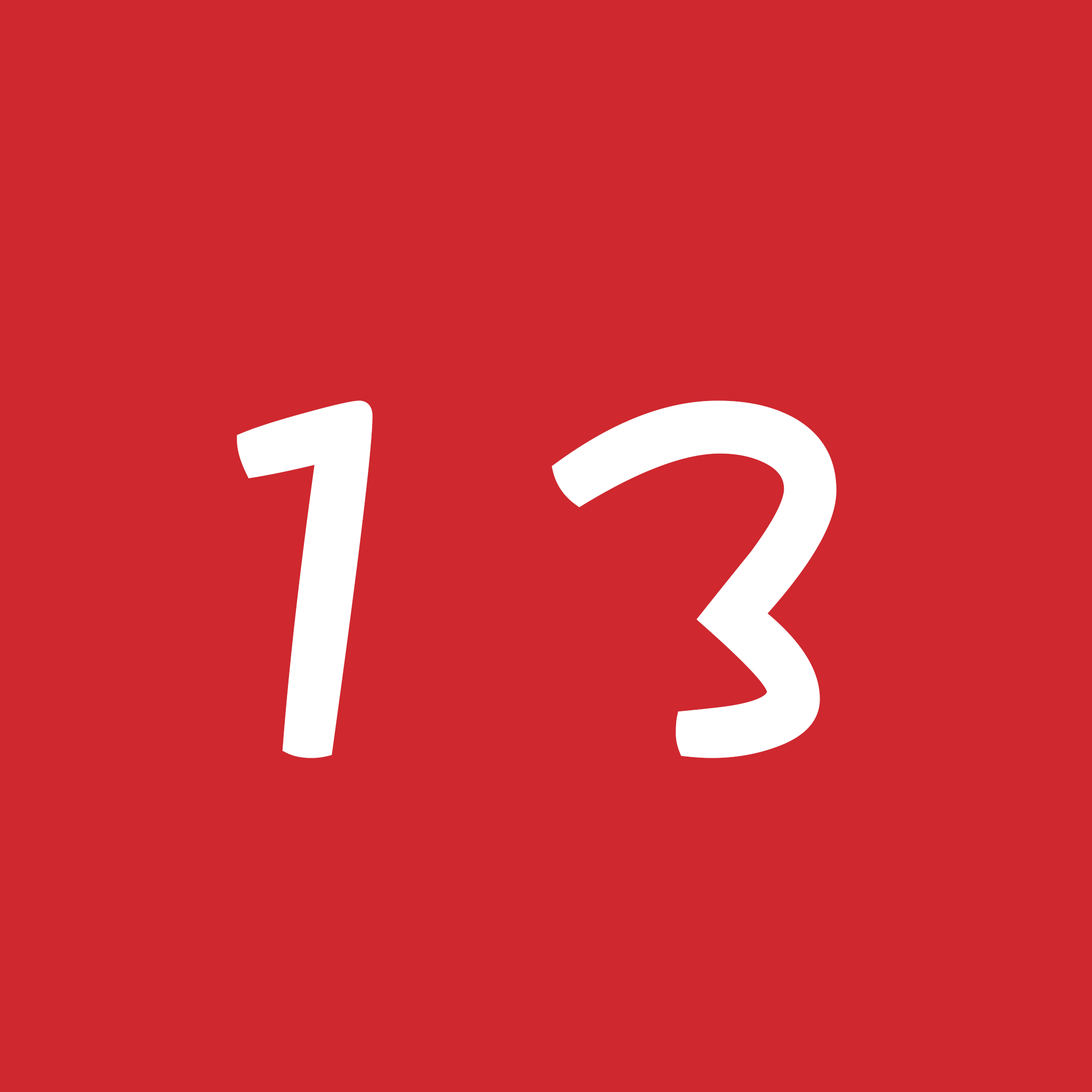
<style>
.page{position:relative;width:1092px;height:1092px;background:#cf282f}
.page>*{position:absolute;margin:0}
.t1{font:533.2px "DFPWaWaW5";color:#ffffff;font-weight:bold}
</style>
<div class="page">
<p class="t1" style="left:237px;top:400px;width:600px;height:358px">13</p>
</div>
